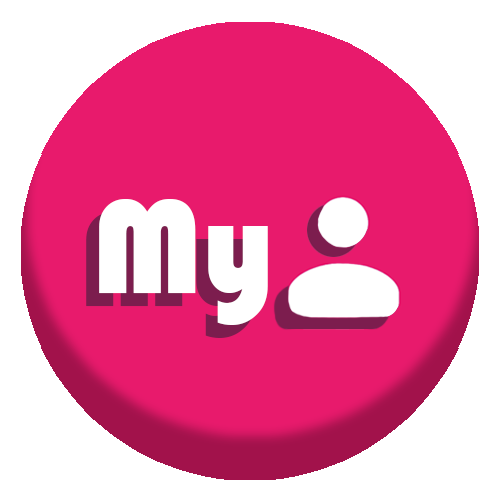
<style>
.page{position:relative;width:500px;height:500px;background:#e81a6c}
.page>*{position:absolute;margin:0}
.t1{font:137.6px "Bauhaus93";color:#ffffff}
.t2{font:137.5px "Bauhaus93"}
</style>
<div class="page">
<p class="t1" style="left:99px;top:199px;width:169px;height:126px">My</p>
<p class="t2" style="left:86px;top:212px;width:170px;height:126px">My</p>
</div>
